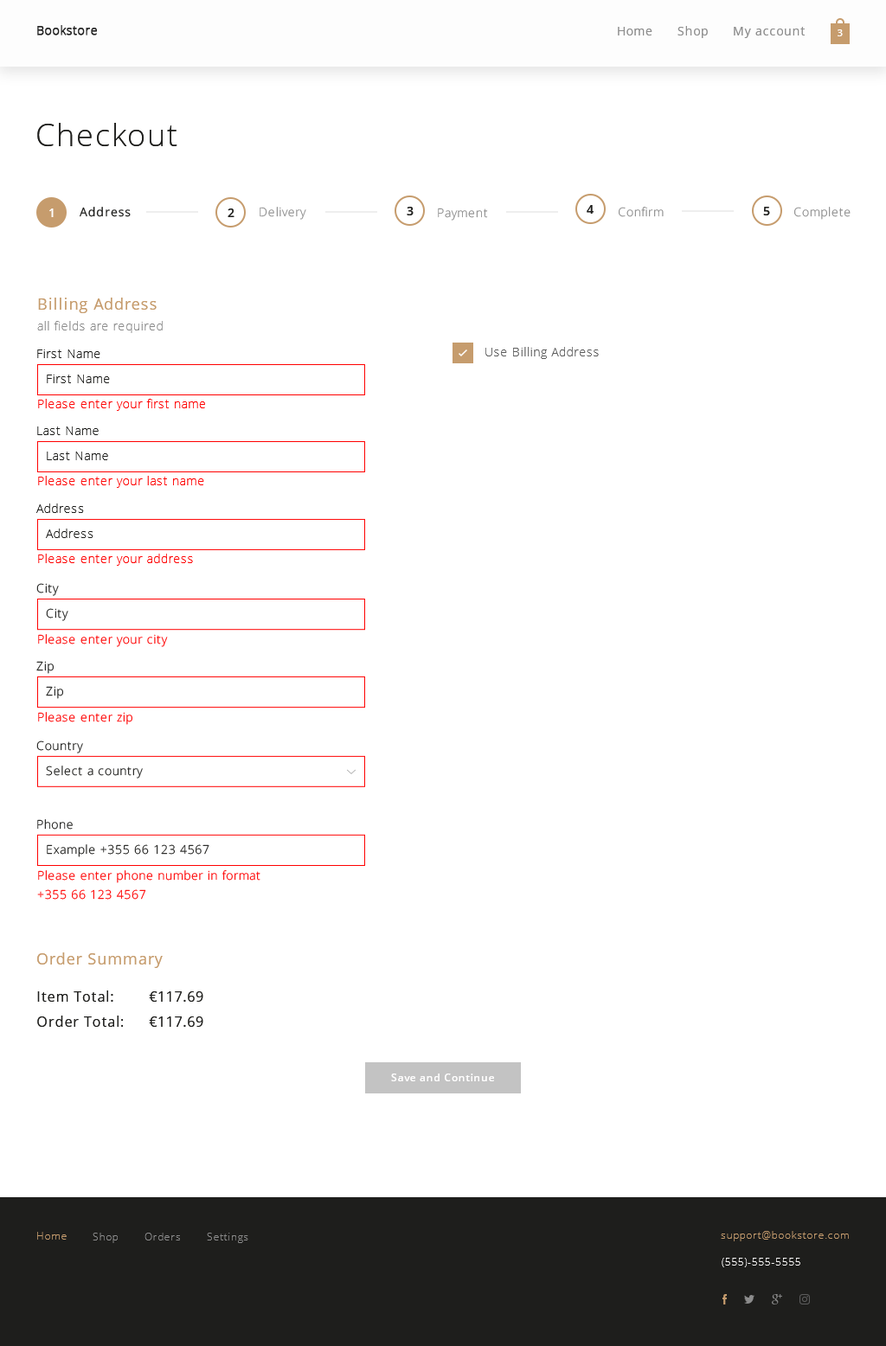
<style>
.page{position:relative;width:886px;height:1346px;background:#ffffff}
.page>*{position:absolute;margin:0}
.t1{font:31.1px "OpenSans-Light";letter-spacing:0.05em;color:#1e1e1c}
.t2{font:12.1px "OpenSans-Semibold";letter-spacing:0.05em;color:#fdfdfd}
.t3{font:12.1px "OpenSans";letter-spacing:0.05em;color:#1e1e1c}
.t4{font:12.1px "OpenSans-Semibold";letter-spacing:0.05em;color:#1e1e1c}
.t5{font:12.1px "OpenSans-Light";letter-spacing:0.05em;color:#8c8c8c}
.t6{font:15.6px "OpenSans";letter-spacing:0.05em;color:#c69c6d}
.t7{font:12.1px "OpenSans-Light";letter-spacing:0.05em;color:#1e1e1c}
.t8{font:12.1px "OpenSans-Light";letter-spacing:0.05em;color:#5c5c5c}
.t9{font:12.1px "OpenSans-Light";letter-spacing:0.05em;color:#ff0000}
.t10{font:12.2px "OpenSans-Light";letter-spacing:0.05em}
.t11{font:12.2px "OpenSans-Light";letter-spacing:0.05em;color:#1e1e1c}
.t12{font:12.1px/19px "OpenSans-Light";letter-spacing:0.05em;color:#ff0000}
.t13{font:13.8px "OpenSans";letter-spacing:0.05em;color:#1e1e1c}
.t14{font:10.4px "OpenSans-Semibold";letter-spacing:0.05em;color:#fffefe}
</style>
<div class="page">
<p class="t1" style="left:37px;top:123px;width:140px;height:23px">Checkout</p>
<p class="t2" style="left:49px;top:208px;width:5px;height:9px">1</p>
<p class="t3" style="left:80px;top:207px;width:51px;height:10px">Address</p>
<p class="t4" style="left:228px;top:208px;width:6px;height:9px">2</p>
<p class="t5" style="left:260px;top:207px;width:46px;height:13px">Delivery</p>
<p class="t4" style="left:407px;top:207px;width:7px;height:8px">3</p>
<p class="t5" style="left:438px;top:208px;width:50px;height:13px">Payment</p>
<p class="t4" style="left:587px;top:205px;width:6px;height:9px">4</p>
<p class="t5" style="left:619px;top:207px;width:45px;height:10px">Confirm</p>
<p class="t4" style="left:763px;top:207px;width:7px;height:8px">5</p>
<p class="t5" style="left:794px;top:207px;width:56px;height:13px">Complete</p>
<p class="t6" style="left:38px;top:298px;width:119px;height:15px">Billing Address</p>
<p class="t5" style="left:37px;top:321px;width:126px;height:12px">all fields are required</p>
<p class="t7" style="left:37px;top:349px;width:63px;height:9px">First Name</p>
<p class="t8" style="left:485px;top:347px;width:114px;height:12px">Use Billing Address</p>
<p class="t7" style="left:47px;top:375px;width:63px;height:8px">First Name</p>
<p class="t9" style="left:38px;top:399px;width:167px;height:12px">Please enter your first name</p>
<p class="t7" style="left:37px;top:426px;width:62px;height:9px">Last Name</p>
<p class="t7" style="left:47px;top:452px;width:61px;height:8px">Last Name</p>
<p class="t9" style="left:38px;top:476px;width:166px;height:12px">Please enter your last name</p>
<p class="t7" style="left:36px;top:503px;width:48px;height:10px">Address</p>
<p class="t7" style="left:46px;top:529px;width:47px;height:9px">Address</p>
<p class="t9" style="left:38px;top:554px;width:155px;height:12px">Please enter your address</p>
<p class="t10" style="left:36px;top:583px;width:23px;height:13px">City</p>
<p class="t10" style="left:46px;top:608px;width:22px;height:13px">City</p>
<p class="t10" style="left:38px;top:634px;width:130px;height:13px">Please enter your city</p>
<p class="t11" style="left:36px;top:661px;width:18px;height:13px">Zip</p>
<p class="t11" style="left:46px;top:686px;width:17px;height:13px">Zip</p>
<p class="t10" style="left:38px;top:712px;width:94px;height:13px">Please enter zip</p>
<p class="t10" style="left:36px;top:741px;width:47px;height:12px">Country</p>
<p class="t10" style="left:46px;top:766px;width:97px;height:13px">Select a country</p>
<p class="t10" style="left:37px;top:819px;width:36px;height:11px">Phone</p>
<p class="t11" style="left:47px;top:844px;width:162px;height:13px">Example +355 66 123 4567</p>
<p class="t12" style="left:37px;top:870px;width:223px;height:30px">Please enter phone number in format <br>+355 66 123 4567</p>
<p class="t6" style="left:37px;top:952px;width:126px;height:16px">Order Summary</p>
<p class="t13" style="left:37px;top:991px;width:76px;height:11px">Item Total:</p>
<p class="t13" style="left:149px;top:991px;width:54px;height:11px">€117.69</p>
<p class="t13" style="left:37px;top:1016px;width:86px;height:11px">Order Total:</p>
<p class="t13" style="left:149px;top:1016px;width:54px;height:11px">€117.69</p>
<p class="t14" style="left:391px;top:1074px;width:103px;height:7px">Save and Continue</p>
</div>
